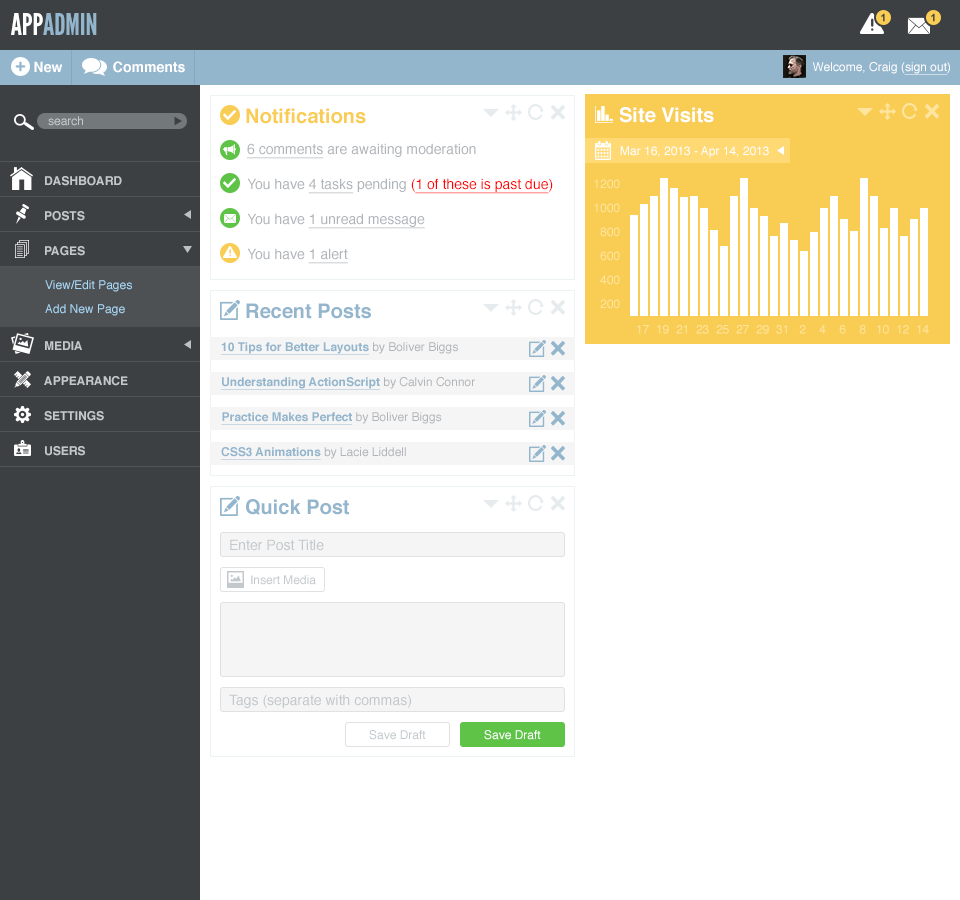
<style>
.page{position:relative;width:960px;height:900px;background:#ffffff}
.page>*{position:absolute;margin:0}
.t1{font:30px "LeagueGothic";color:#93b6cd}
.t2{font:30px "LeagueGothic";color:#ffffff}
.t3{font:14px "Helvetica-Bold";color:#ffffff}
.t4{font:12px "Helvetica";color:#ffffff}
.t5{font:12px "Helvetica";color:#ffffff;text-decoration:underline}
.t6{font:20px "Helvetica-Bold";color:#f9cc54}
.t7{font:20px "Helvetica-Bold";color:#ffffff}
.t8{font:12px "Helvetica";color:#c2c8cc}
.t9{font:14px/35px "Helvetica";color:#b0b5b9}
.t10{font:14px/35px "Helvetica";color:#b0b5b9;text-decoration:underline}
.t11{font:14px/35px "Helvetica";color:#ff0101}
.t12{font:14px/35px "Helvetica";color:#ff0101;text-decoration:underline}
.t13{font:12px "Helvetica-Bold";color:#c2c8cc}
.t14{font:12px/24px "Helvetica";color:#ffe59f}
.t15{font:12px/24px "Helvetica";color:#a9d7f6}
.t16{font:20px "Helvetica-Bold";color:#93b6cd}
.t17{font:12px "Helvetica";color:#ffe59f}
.t18{font:12px "Helvetica-Bold";color:#93b6cd;text-decoration:underline}
.t19{font:12px/35px "Helvetica";color:#b0b5b9}
.t20{font:14px "Helvetica";color:#c2c8cc}
</style>
<div class="page">
<p class="t1" style="left:11px;top:13px;width:86px;height:22px"><span class="t2">APP</span>ADMIN</p>
<p class="t3" style="left:34px;top:61px;width:29px;height:12px">New</p>
<p class="t3" style="left:113px;top:61px;width:72px;height:12px">Comments</p>
<p class="t4" style="left:813px;top:62px;width:137px;height:13px">Welcome, Craig (<span class="t5">sign out</span>)</p>
<p class="t6" style="left:246px;top:108px;width:120px;height:16px">Notifications</p>
<p class="t7" style="left:619px;top:107px;width:95px;height:16px">Site Visits</p>
<p class="t8" style="left:48px;top:116px;width:35px;height:10px">search</p>
<p class="t9" style="left:247px;top:143px;width:306px;height:121px"><span class="t10">6 comments </span>are awaiting moderation<br>You have <span class="t10">4 tasks </span>pending <span class="t11">(</span><span class="t12">1 of these is past due</span><span class="t11">)<br></span>You have <span class="t10">1 unread message<br></span>You have <span class="t10">1 alert</span></p>
<p class="t4" style="left:620px;top:146px;width:149px;height:12px">Mar 16, 2013 - Apr 14, 2013</p>
<p class="t13" style="left:45px;top:176px;width:77px;height:10px">DASHBOARD</p>
<p class="t14" style="left:594px;top:179px;width:26px;height:130px;text-align:right">1200<br>1000<br>800<br>600<br>400<br>200</p>
<p class="t13" style="left:45px;top:211px;width:40px;height:10px">POSTS</p>
<p class="t13" style="left:45px;top:246px;width:40px;height:10px">PAGES</p>
<p class="t15" style="left:45px;top:280px;width:87px;height:36px">View/Edit Pages<br>Add New Page</p>
<p class="t16" style="left:246px;top:303px;width:125px;height:16px">Recent Posts</p>
<p class="t17" style="left:637px;top:325px;width:12px;height:9px">17</p>
<p class="t17" style="left:657px;top:325px;width:12px;height:9px">19</p>
<p class="t17" style="left:676px;top:325px;width:11px;height:9px">21</p>
<p class="t17" style="left:696px;top:325px;width:13px;height:9px">23</p>
<p class="t17" style="left:716px;top:325px;width:13px;height:9px">25</p>
<p class="t17" style="left:736px;top:325px;width:13px;height:9px">27</p>
<p class="t17" style="left:756px;top:325px;width:13px;height:9px">29</p>
<p class="t17" style="left:776px;top:325px;width:11px;height:9px">31</p>
<p class="t17" style="left:799px;top:325px;width:7px;height:9px">2</p>
<p class="t17" style="left:819px;top:325px;width:7px;height:9px">4</p>
<p class="t17" style="left:839px;top:325px;width:7px;height:9px">6</p>
<p class="t17" style="left:859px;top:325px;width:7px;height:9px">8</p>
<p class="t17" style="left:877px;top:325px;width:12px;height:9px">10</p>
<p class="t17" style="left:897px;top:325px;width:12px;height:9px">12</p>
<p class="t17" style="left:917px;top:325px;width:12px;height:9px">14</p>
<p class="t13" style="left:45px;top:341px;width:37px;height:9px">MEDIA</p>
<p class="t18" style="left:221px;top:342px;width:254px;height:118px">10 Tips for Better Layouts <span class="t19">by Boliver Biggs<br></span>Understanding ActionScript <span class="t19">by Calvin Connor<br></span>Practice Makes Perfect <span class="t19">by Boliver Biggs<br></span>CSS3 Animations <span class="t19">by Lacie Liddell</span></p>
<p class="t13" style="left:44px;top:376px;width:84px;height:10px">APPEARANCE</p>
<p class="t13" style="left:44px;top:411px;width:60px;height:10px">SETTINGS</p>
<p class="t13" style="left:45px;top:446px;width:40px;height:10px">USERS</p>
<p class="t16" style="left:246px;top:499px;width:103px;height:16px">Quick Post</p>
<p class="t20" style="left:230px;top:539px;width:94px;height:12px">Enter Post Title</p>
<p class="t8" style="left:251px;top:575px;width:65px;height:10px">Insert Media</p>
<p class="t20" style="left:229px;top:694px;width:182px;height:14px">Tags (separate with commas)</p>
<p class="t8" style="left:369px;top:730px;width:57px;height:10px">Save Draft</p>
<p class="t4" style="left:484px;top:730px;width:57px;height:10px">Save Draft</p>
</div>
